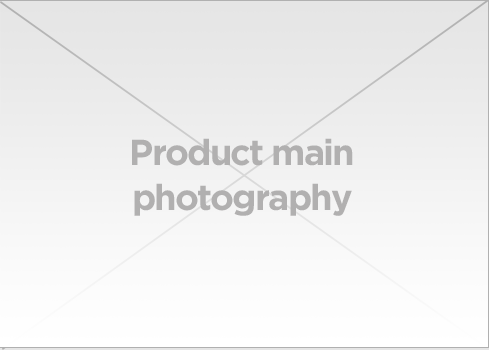
<style>
.page{position:relative;width:489px;height:350px}
.page>*{position:absolute;margin:0}
.t1{font:36.1px/45.1px "GothamBold";letter-spacing:-0.05em;color:#b1b0b0}
</style>
<div class="page">
<p class="t1" style="left:132px;top:138px;width:221px;height:78px;text-align:center">Product main<br>photography</p>
</div>
